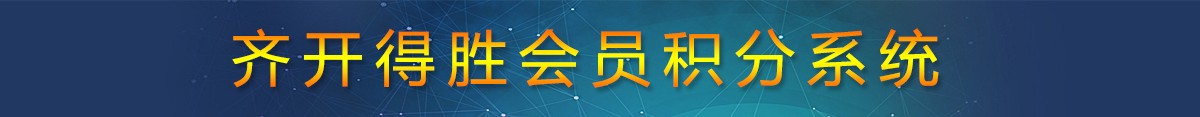
<style>
.page{position:relative;width:1200px;height:117px;background:#213862}
.page>*{position:absolute;margin:0}
.t1{font:60px "MicrosoftYaHei";letter-spacing:0.2em}
</style>
<div class="page">
<p class="t1" style="left:232px;top:28px;width:707px;height:60px">齐开得胜会员积分系统</p>
</div>
